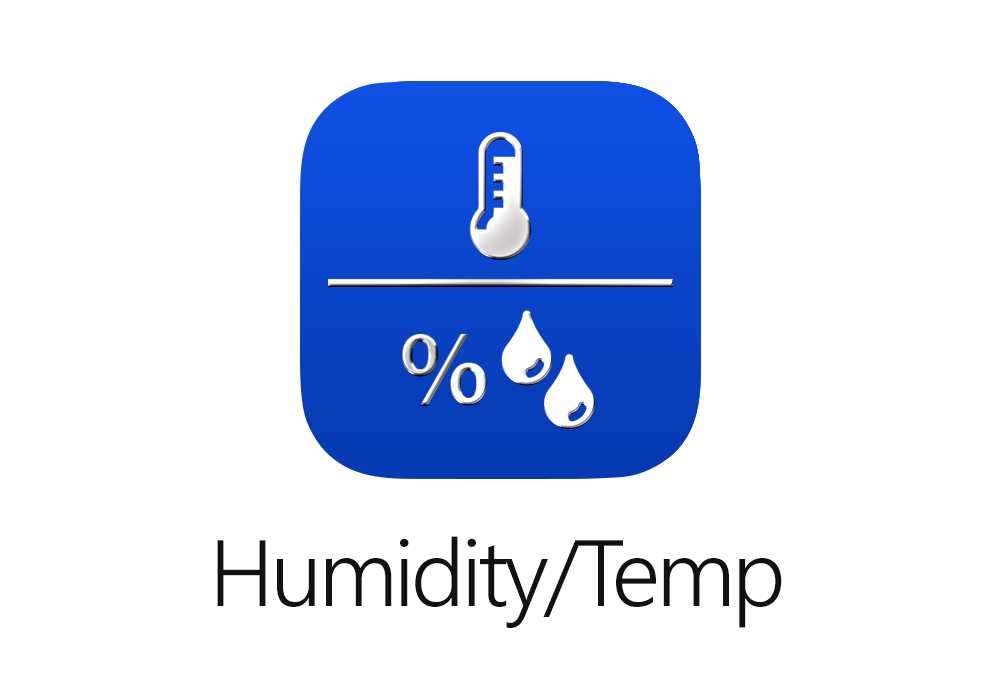
<style>
.page{position:relative;width:1000px;height:700px;background:#ffffff}
.page>*{position:absolute;margin:0}
.t1{font:94px "SegoeUI-Semilight";letter-spacing:-0.04em;color:#111111}
</style>
<div class="page">
<p class="t1" style="left:217px;top:536px;width:565px;height:92px">Humidity/Temp</p>
</div>
